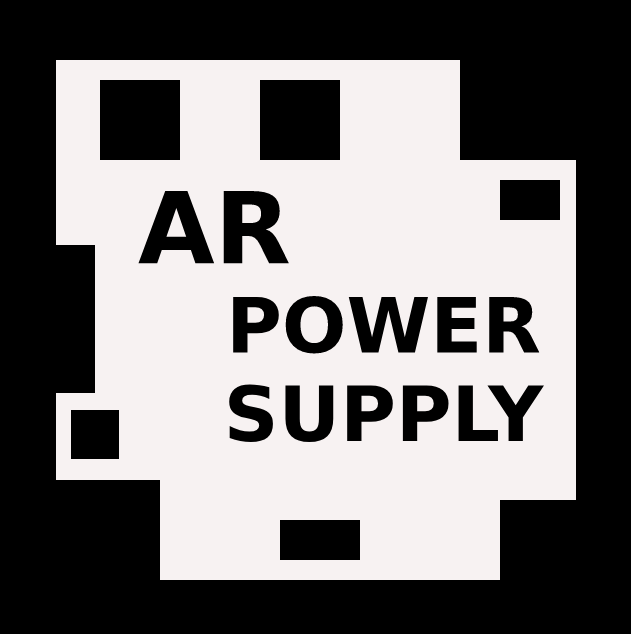
<style>
.page{position:relative;width:631px;height:634px;background:#000000}
.page>*{position:absolute;margin:0}
.t1{font:99px "DejaVuSans-Bold";color:#000000}
.t2{font:76px "DejaVuSans-Bold";color:#000000}
</style>
<div class="page">
<p class="t1" style="left:138px;top:191px;width:151px;height:73px">AR</p>
<p class="t2" style="left:229px;top:296px;width:315px;height:146px;text-align:center">POWER SUPPLY</p>
</div>
